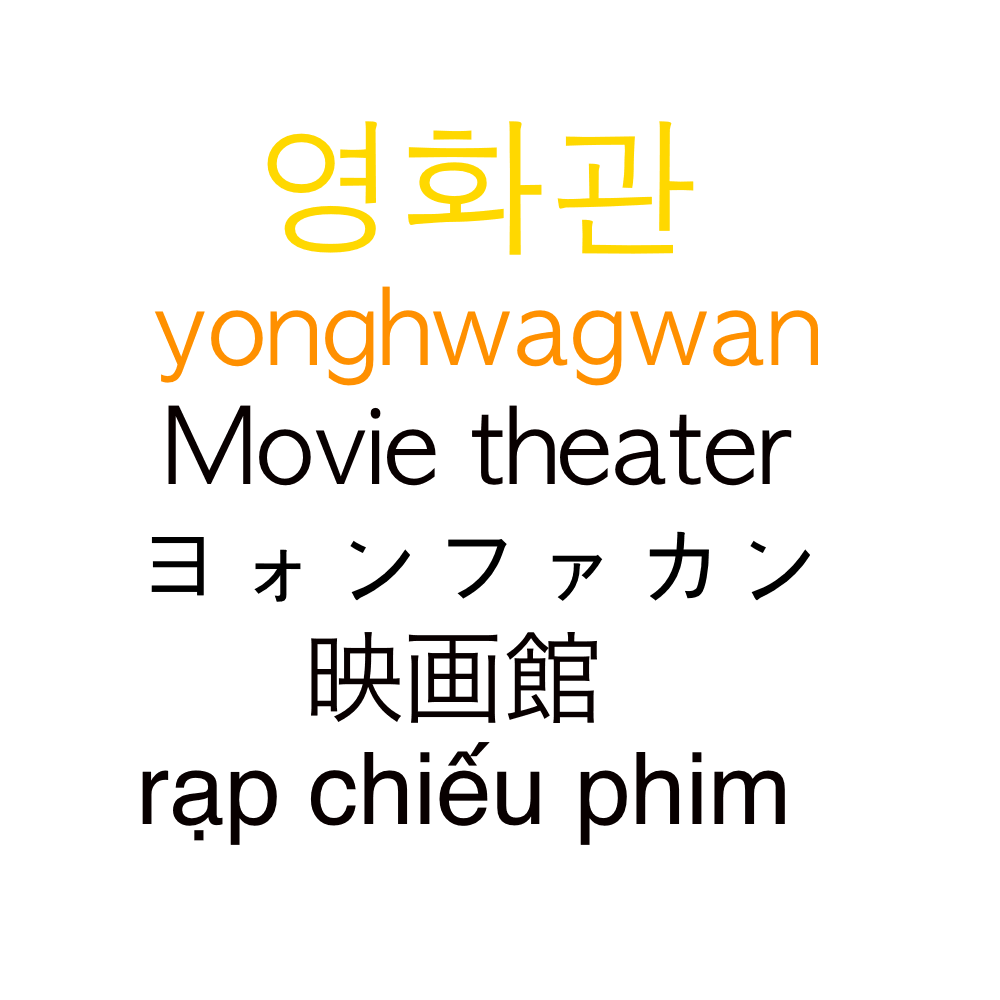
<style>
.page{position:relative;width:1000px;height:1000px;background:#ffffff}
.page>*{position:absolute;margin:0}
.t1{font:150px "AppleGothic";color:#ffd800}
.t2{font:100px "AppleGothic";color:#ff9000}
.t3{font:100px "AppleGothic";color:#080000}
.t4{font:100px "AppleGothic";color:#000000}
.t5{font:100px "HiraKakuProN-W3";color:#080000}
.t6{font:100px "Helvetica";color:#080000}
</style>
<div class="page">
<p class="t1" style="left:267px;top:121px;width:427px;height:134px">영화관</p>
<p class="t2" style="left:154px;top:286px;width:664px;height:100px">yonghwagwan</p>
<p class="t3" style="left:168px;top:405px;width:624px;height:81px">Movie theater</p>
<p class="t4" style="left:151px;top:531px;width:659px;height:71px">ヨォンファカン</p>
<p class="t5" style="left:311px;top:632px;width:286px;height:91px">映画館</p>
<p class="t6" style="left:142px;top:742px;width:643px;height:103px">rạp chiếu phim</p>
</div>
